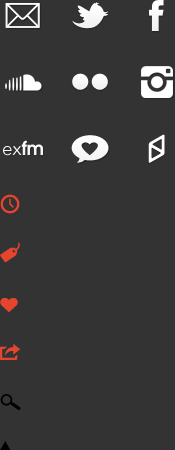
<style>
.page{position:relative;width:175px;height:450px;background:#333333}
.page>*{position:absolute;margin:0}
.t1{font:18.7px "Avenir-Book";color:#ffffff}
.t2{font:18.7px "AvantGarde-Demi";color:#ffffff}
</style>
<div class="page">
<p class="t1" style="left:3px;top:140px;width:40px;height:16px">ex<span class="t2">fm</span></p>
</div>
